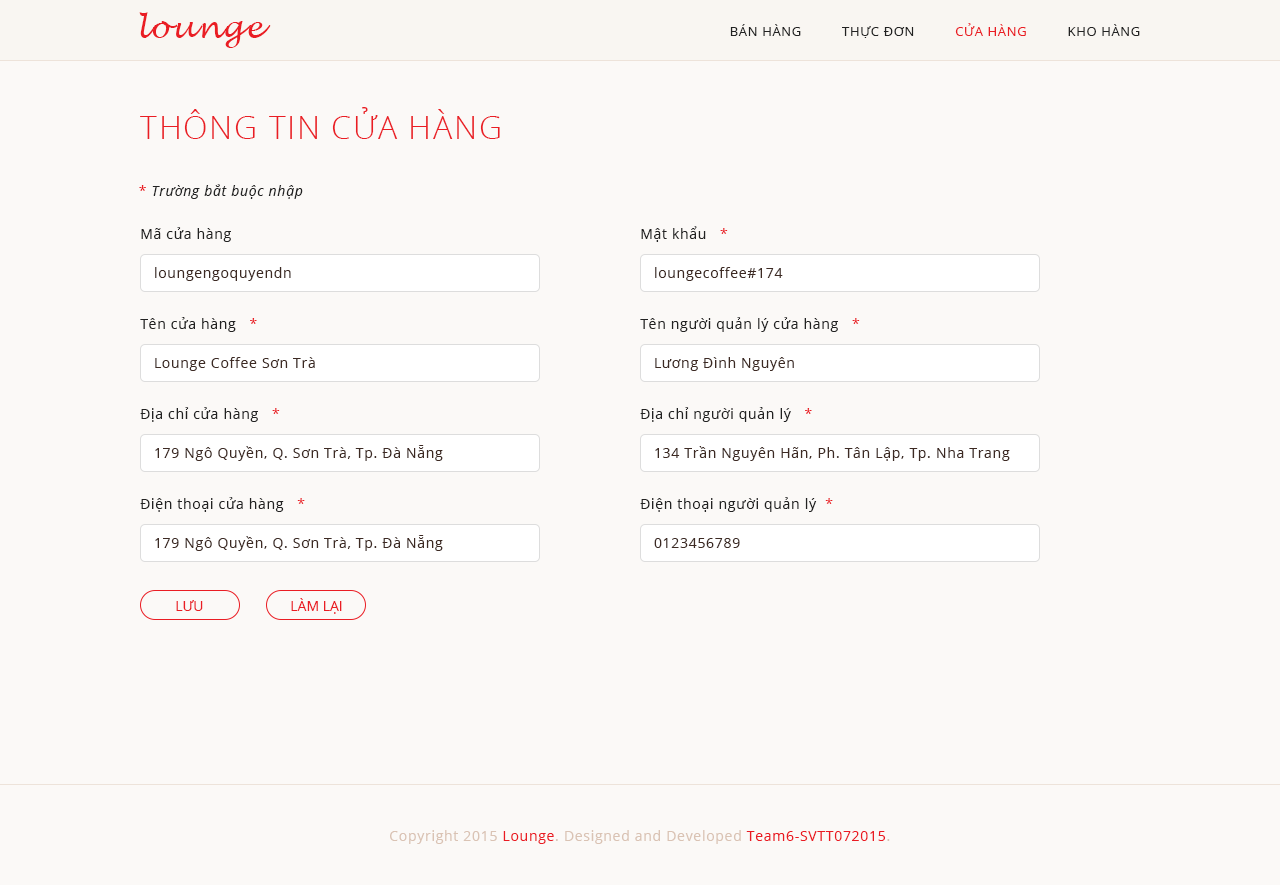
<style>
.page{position:relative;width:1280px;height:885px;background:#fbf9f7}
.page>*{position:absolute;margin:0}
.t1{font:30px "LucidaHandwriting-Italic";letter-spacing:0.05em;color:#ea1d24}
.t2{font:13px "OpenSans";letter-spacing:0.05em;color:#222222}
.t3{font:13px "OpenSans";letter-spacing:0.05em;color:#ea1d24}
.t4{font:32px "OpenSans-Light";letter-spacing:0.05em;color:#ea1d24}
.t5{font:14px "OpenSans-Italic";letter-spacing:0.05em;color:#222222}
.t6{font:14px "OpenSans";letter-spacing:0.05em;color:#ea1d24}
.t7{font:14px "OpenSans";letter-spacing:0.05em;color:#222222}
.t8{font:14px "OpenSans";letter-spacing:0.05em;color:#3d2a23}
.t9{font:14px "OpenSans";color:#ea1d24}
.t10{font:14px "OpenSans";letter-spacing:0.05em;color:#dac3b4}
.t11{font:14px "OpenSans";letter-spacing:0.05em;color:#ea1b23}
</style>
<div class="page">
<p class="t1" style="left:139px;top:12px;width:132px;height:36px">lounge</p>
<p class="t2" style="left:730px;top:23px;width:410px;height:15px">BÁN HÀNG          THỰC ĐƠN          <span class="t3">CỬA HÀNG</span>          KHO HÀNG</p>
<p class="t4" style="left:140px;top:107px;width:360px;height:32px">THÔNG TIN CỬA HÀNG</p>
<p class="t5" style="left:139px;top:184px;width:164px;height:15px"><span class="t6">* </span>Trường bắt buộc nhập</p>
<p class="t7" style="left:141px;top:227px;width:90px;height:15px">Mã cửa hàng</p>
<p class="t7" style="left:641px;top:226px;width:87px;height:16px">Mật khẩu   <span class="t6">*</span></p>
<p class="t8" style="left:155px;top:267px;width:136px;height:14px">loungengoquyendn</p>
<p class="t8" style="left:655px;top:267px;width:128px;height:14px">loungecoffee#174</p>
<p class="t7" style="left:140px;top:317px;width:117px;height:15px">Tên cửa hàng   <span class="t6">*</span></p>
<p class="t7" style="left:640px;top:317px;width:220px;height:15px">Tên người quản lý cửa hàng   <span class="t6">*</span></p>
<p class="t8" style="left:155px;top:357px;width:160px;height:14px">Lounge Coffee Sơn Trà</p>
<p class="t8" style="left:655px;top:357px;width:139px;height:14px">Lương Đình Nguyên</p>
<p class="t7" style="left:140px;top:407px;width:140px;height:15px">Địa chỉ cửa hàng   <span class="t6">*</span></p>
<p class="t7" style="left:640px;top:407px;width:172px;height:15px">Địa chỉ người quản lý   <span class="t6">*</span></p>
<p class="t8" style="left:155px;top:445px;width:288px;height:16px">179 Ngô Quyền, Q. Sơn Trà, Tp. Đà Nẵng</p>
<p class="t8" style="left:655px;top:446px;width:355px;height:15px">134 Trần Nguyên Hãn, Ph. Tân Lập, Tp. Nha Trang</p>
<p class="t7" style="left:140px;top:497px;width:165px;height:15px">Điện thoại cửa hàng   <span class="t6">*</span></p>
<p class="t7" style="left:640px;top:497px;width:193px;height:15px">Điện thoại người quản lý  <span class="t6">*</span></p>
<p class="t8" style="left:155px;top:535px;width:288px;height:16px">179 Ngô Quyền, Q. Sơn Trà, Tp. Đà Nẵng</p>
<p class="t8" style="left:654px;top:538px;width:86px;height:10px">0123456789</p>
<p class="t9" style="left:176px;top:600px;width:27px;height:11px">LƯU</p>
<p class="t9" style="left:291px;top:598px;width:51px;height:16px">LÀM LẠI</p>
<p class="t10" style="left:390px;top:830px;width:500px;height:14px">Copyright 2015 <span class="t11">Lounge</span>. Designed and Developed <span class="t11">Team6-SVTT072015</span>.</p>
</div>
